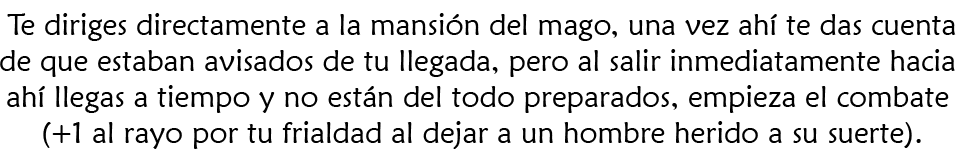
<style>
.page{position:relative;width:956px;height:157px;background:#ffffff}
.page>*{position:absolute;margin:0}
.t1{font:30px "MaiandraGD-Regular";color:#000000}
</style>
<div class="page">
<p class="t1" style="left:0px;top:13px;width:956px;height:136px;text-align:center">Te diriges directamente a la mansión del mago, una vez ahí te das cuenta<br>de que estaban avisados de tu llegada, pero al salir inmediatamente hacia <br>ahí llegas a tiempo y no están del todo preparados, empieza el combate <br>(+1 al rayo por tu frialdad al dejar a un hombre herido a su suerte).</p>
</div>
